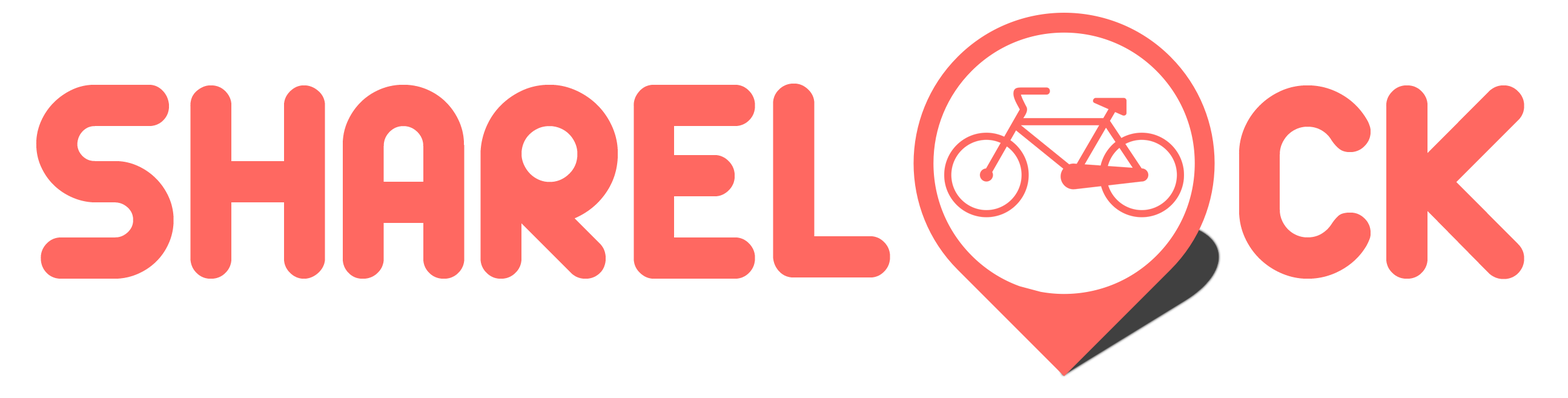
<style>
.page{position:relative;width:1568px;height:398px;background:#ffffff}
.page>*{position:absolute;margin:0}
.t1{font:302.8px "zArista";color:#ff6861}
</style>
<div class="page">
<p class="t1" style="left:36px;top:84px;width:1488px;height:195px">SHAREL     CK</p>
</div>
